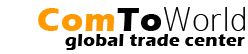
<style>
.page{position:relative;width:248px;height:54px;background:#ffffff}
.page>*{position:absolute;margin:0}
.t1{font:34.5px "DistrictThin";letter-spacing:0.02em;color:#000000}
.t2{font:34.5px "ErasITC-Bold";letter-spacing:0.02em;color:#ff9900}
.t3{font:34.5px "ErasITC-Bold";letter-spacing:0.02em;color:#000000}
.t4{font:18px "ErasITC-Bold";letter-spacing:0.02em;color:#000000}
</style>
<div class="page">
<p class="t1" style="left:38px;top:7px;width:207px;height:24px"><span class="t2">Com</span><span class="t3">To</span>World</p>
<p class="t4" style="left:65px;top:34px;width:180px;height:16px">global trade center</p>
</div>
